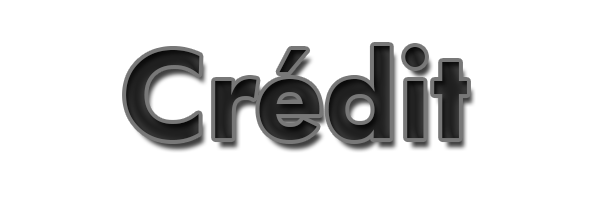
<style>
.page{position:relative;width:600px;height:200px;background:#ffffff}
.page>*{position:absolute;margin:0}
.t1{font:120px "FuturaBT-Heavy";color:#212121}
</style>
<div class="page">
<p class="t1" style="left:126px;top:46px;width:341px;height:94px">Crédit</p>
</div>
